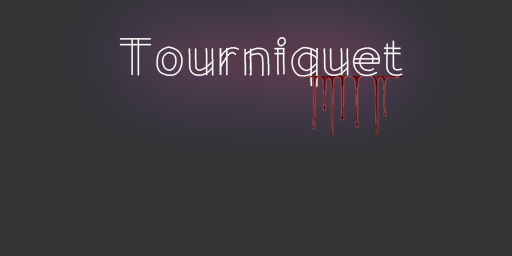
<style>
.page{position:relative;width:512px;height:256px;background:#333333}
.page>*{position:absolute;margin:0}
.t1{font:52.2px "BluePrinted";color:#ffffff}
</style>
<div class="page">
<p class="t1" style="left:119px;top:37px;width:284px;height:50px">Tourniquet</p>
</div>
